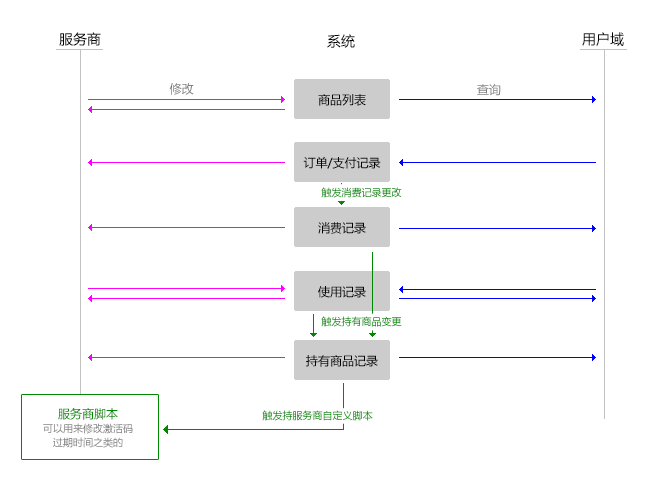
<style>
.page{position:relative;width:669px;height:484px;background:#ffffff}
.page>*{position:absolute;margin:0}
.t1{font:14px "MicrosoftYaHei";color:#000000}
.t2{font:12px "MicrosoftYaHei";color:#7e7e7e}
.t3{font:12px "MicrosoftYaHei";color:#000000}
.t4{font:10px "MicrosoftYaHei"}
.t5{font:10px "MicrosoftYaHei";color:#008800}
.t6{font:10px/14px "MicrosoftYaHei";color:#7e7e7e}
.t7{font:12px/14px "MicrosoftYaHei";color:#008800}
</style>
<div class="page">
<p class="t1" style="left:59px;top:32px;width:42px;height:14px">服务商</p>
<p class="t1" style="left:327px;top:34px;width:28px;height:14px">系统</p>
<p class="t1" style="left:582px;top:32px;width:42px;height:14px">用户域</p>
<p class="t2" style="left:169px;top:83px;width:25px;height:12px">修改</p>
<p class="t2" style="left:477px;top:84px;width:24px;height:12px">查询</p>
<p class="t3" style="left:318px;top:94px;width:48px;height:12px">商品列表</p>
<p class="t3" style="left:303px;top:156px;width:78px;height:13px">订单/支付记录</p>
<p class="t4" style="left:321px;top:187px;width:81px;height:11px">触发消费记录更改</p>
<p class="t3" style="left:318px;top:222px;width:48px;height:12px">消费记录</p>
<p class="t3" style="left:318px;top:286px;width:48px;height:12px">使用记录</p>
<p class="t5" style="left:321px;top:316px;width:81px;height:11px">触发持有商品变更</p>
<p class="t3" style="left:306px;top:355px;width:72px;height:12px">持有商品记录</p>
<p class="t6" style="left:43px;top:407px;width:90px;height:41px;text-align:center"><span class="t7">服务商脚本<br></span>可以用来修改激活码<br>过期时间之类的</p>
<p class="t5" style="left:262px;top:410px;width:111px;height:11px">触发持服务商自定义脚本</p>
</div>
